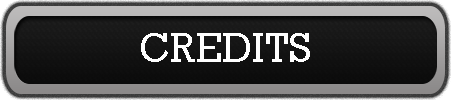
<style>
.page{position:relative;width:451px;height:100px}
.page>*{position:absolute;margin:0}
.t1{font:41.7px "Rockwell";color:#ffffff}
</style>
<div class="page">
<p class="t1" style="left:141px;top:33px;width:169px;height:29px">CREDITS</p>
</div>
